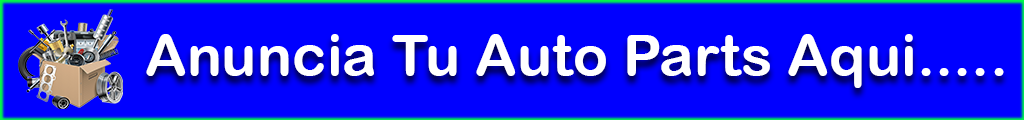
<style>
.page{position:relative;width:1024px;height:120px;background:#0000ff}
.page>*{position:absolute;margin:0}
.t1{font:58.3px "ArialRoundedMTBold";color:#ffffff}
</style>
<div class="page">
<p class="t1" style="left:146px;top:34px;width:858px;height:54px">Anuncia Tu Auto Parts Aqui.....</p>
</div>
